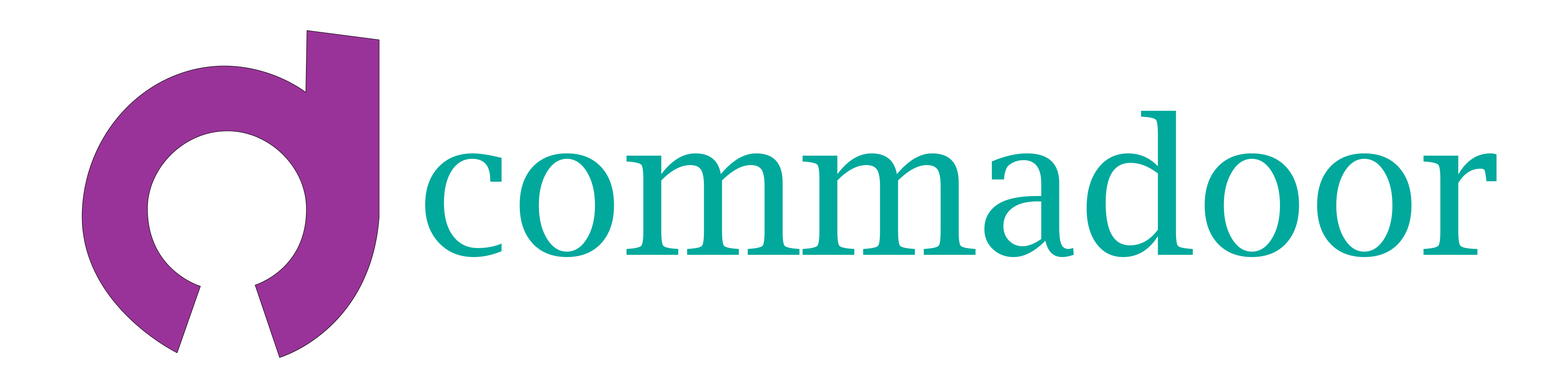
<style>
.page{position:relative;width:1568px;height:388px;background:#ffffff}
.page>*{position:absolute;margin:0}
.t1{font:186.2px "LucidaBright";color:#00a99c}
</style>
<div class="page">
<p class="t1" style="left:425px;top:111px;width:1072px;height:146px">commadoor</p>
</div>
